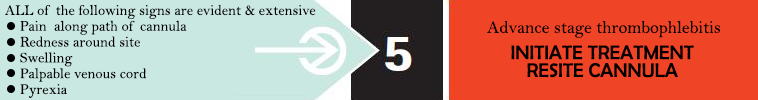
<style>
.page{position:relative;width:758px;height:100px;background:#ef4426}
.page>*{position:absolute;margin:0}
.t1{font:14.8px/15.8px "BellMT";color:#020000}
.t2{font:17.8px "BellMT";color:#020000}
.t3{font:19.8px/17.8px "BerlinSansFB-Reg";color:#020000}
</style>
<div class="page">
<p class="t1" style="left:5px;top:4px;width:311px;height:94px">ALL of the following signs are evident &amp; extensive<br>    Pain  along path of cannula<br>    Redness around site<br>    Swelling<br>    Palpable venous cord<br>    Pyrexia</p>
<p class="t2" style="left:487px;top:20px;width:233px;height:18px">Advance stage thrombophlebitis</p>
<p class="t3" style="left:511px;top:45px;width:183px;height:33px;text-align:center">INITIATE TREATMENT<br>RESITE CANNULA</p>
</div>
